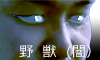
<style>
.page{position:relative;width:100px;height:60px}
.page>*{position:absolute;margin:0}
.t1{font:14px "MeiryoUI";color:#ffffff}
</style>
<div class="page">
<p class="t1" style="left:19px;top:44px;width:72px;height:16px">野　獣　(闇）</p>
</div>
